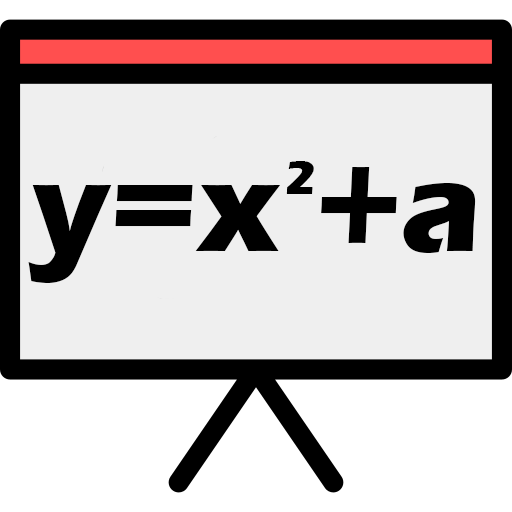
<style>
.page{position:relative;width:512px;height:512px;background:#efefef}
.page>*{position:absolute;margin:0}
.t1{font:48px "ErasITC-Bold";color:#000000}
.t2{font:133.3px "ErasITC-Bold";color:#000000}
</style>
<div class="page">
<p class="t1" style="left:286px;top:161px;width:28px;height:33px">2</p>
<p class="t2" style="left:28px;top:167px;width:448px;height:116px">y=x +a</p>
</div>
